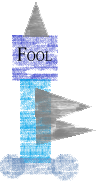
<style>
.page{position:relative;width:96px;height:186px;background:#ffffff}
.page>*{position:absolute;margin:0}
.t1{font:20px "TimesNewRomanPSMT";color:#000000;font-variant:small-caps;scale:0.9 1}
</style>
<div class="page">
<p class="t1" style="left:17px;top:47px;width:35px;height:14px">Fool</p>
</div>
